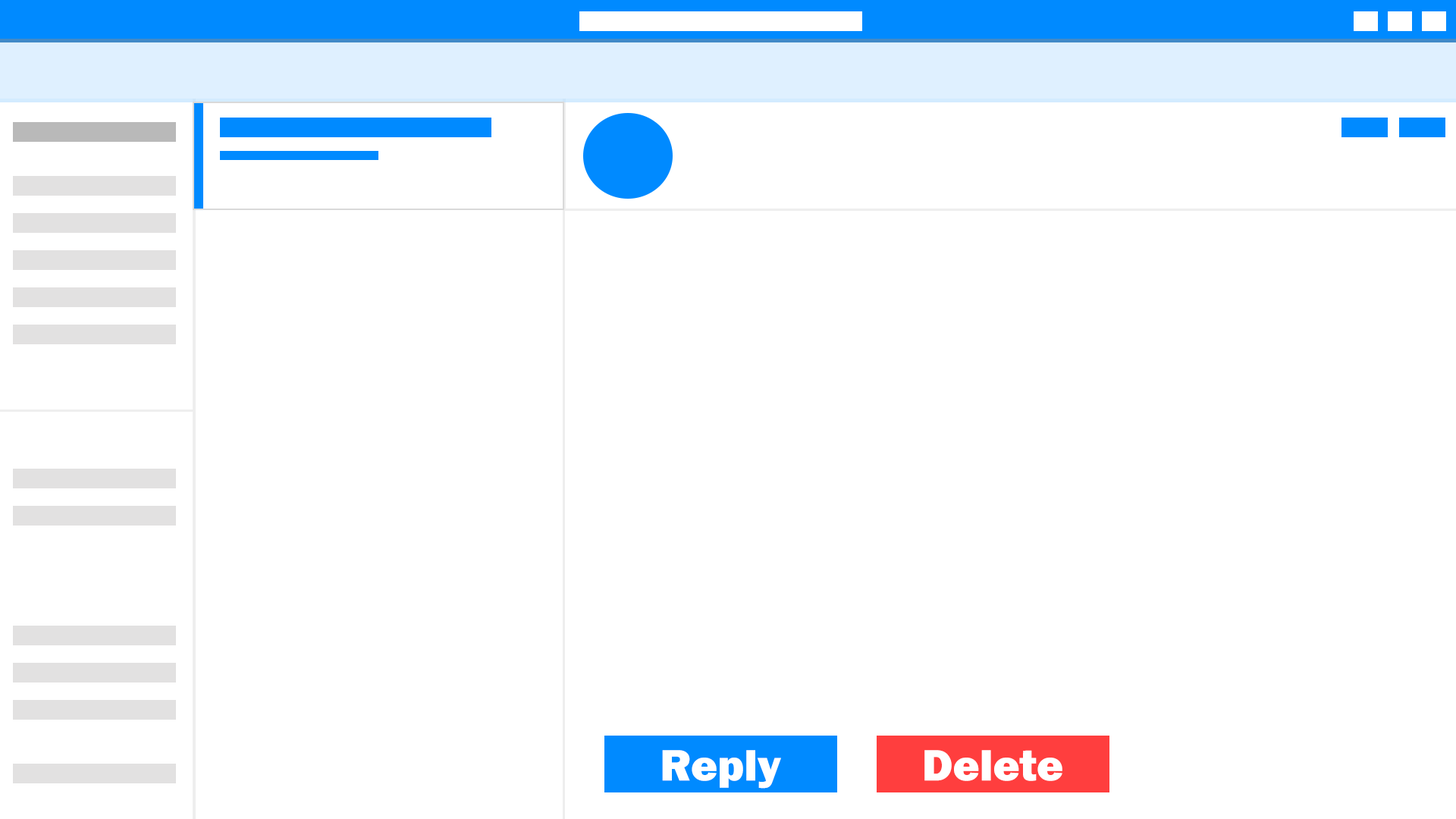
<style>
.page{position:relative;width:1456px;height:819px;background:#ffffff}
.page>*{position:absolute;margin:0}
.t1{font:45.5px "FranklinGothic-Heavy";color:#ffffff}
</style>
<div class="page">
<p class="t1" style="left:662px;top:750px;width:119px;height:39px">Reply</p>
<p class="t1" style="left:924px;top:750px;width:138px;height:31px">Delete</p>
</div>
